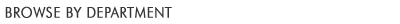
<style>
.page{position:relative;width:400px;height:24px;background:#ffffff}
.page>*{position:absolute;margin:0}
.t1{font:14.7px "FuturaBT-Light";letter-spacing:0.025em;color:#363636;text-transform:uppercase;font-weight:bold;scale:0.92 1}
</style>
<div class="page">
<p class="t1" style="left:5px;top:6px;width:167px;height:12px">BROWSE BY DEPARTMENT</p>
</div>
